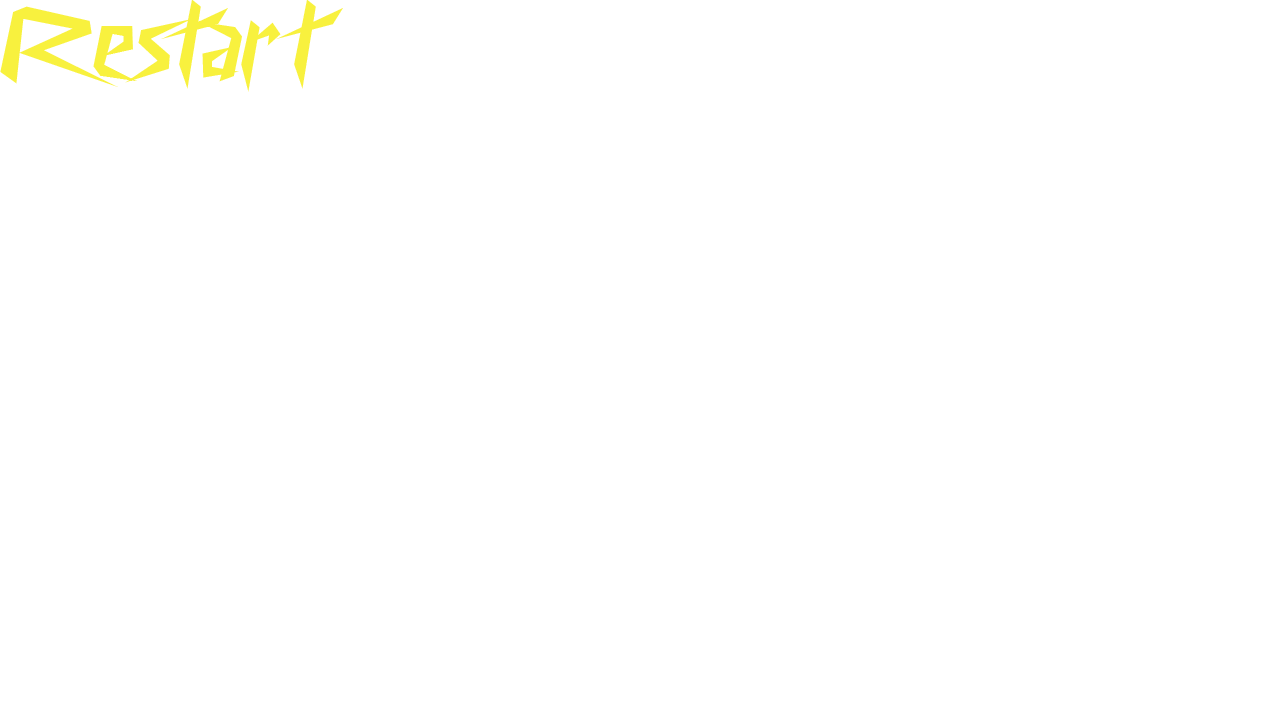
<style>
.page{position:relative;width:1280px;height:720px;background:#ffffff}
.page>*{position:absolute;margin:0}
.t1{font:100px "CyberwayRiders";color:#f8f13e}
</style>
<div class="page">
<p class="t1" style="left:0px;top:0px;width:343px;height:92px">Restart</p>
</div>
